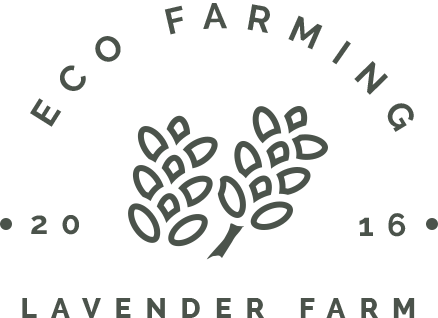
<style>
.page{position:relative;width:438px;height:318px;background:#ffffff}
.page>*{position:absolute;margin:0}
.t1{font:36px "Raleway-Bold";letter-spacing:0.5em;color:#4b534b;text-transform:uppercase}
.t2{font:32px "Raleway-Bold";letter-spacing:0.4em;color:#4b534b;text-transform:uppercase}
.t3{font:28px "Raleway-ExtraBold";letter-spacing:0.5em;color:#4b534b;text-transform:uppercase}
</style>
<div class="page">
<p class="t1" style="left:30px;top:3px;width:384px;height:129px;rotate:180deg">Eco Farming</p>
<p class="t2" style="left:31px;top:215px;width:48px;height:20px">20</p>
<p class="t2" style="left:359px;top:213px;width:47px;height:24px">16</p>
<p class="t3" style="left:22px;top:298px;width:393px;height:20px">Lavender Farm</p>
</div>
